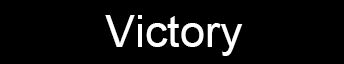
<style>
.page{position:relative;width:344px;height:64px;background:#000000}
.page>*{position:absolute;margin:0}
.t1{font:45.3px "ArialMT";color:#ffffff}
</style>
<div class="page">
<p class="t1" style="left:105px;top:15px;width:138px;height:41px">Victory</p>
</div>
